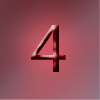
<style>
.page{position:relative;width:100px;height:100px}
.page>*{position:absolute;margin:0}
.t1{font:72px "MyriadPro-Regular"}
</style>
<div class="page">
<p class="t1" style="left:31px;top:25px;width:35px;height:47px">4</p>
</div>
